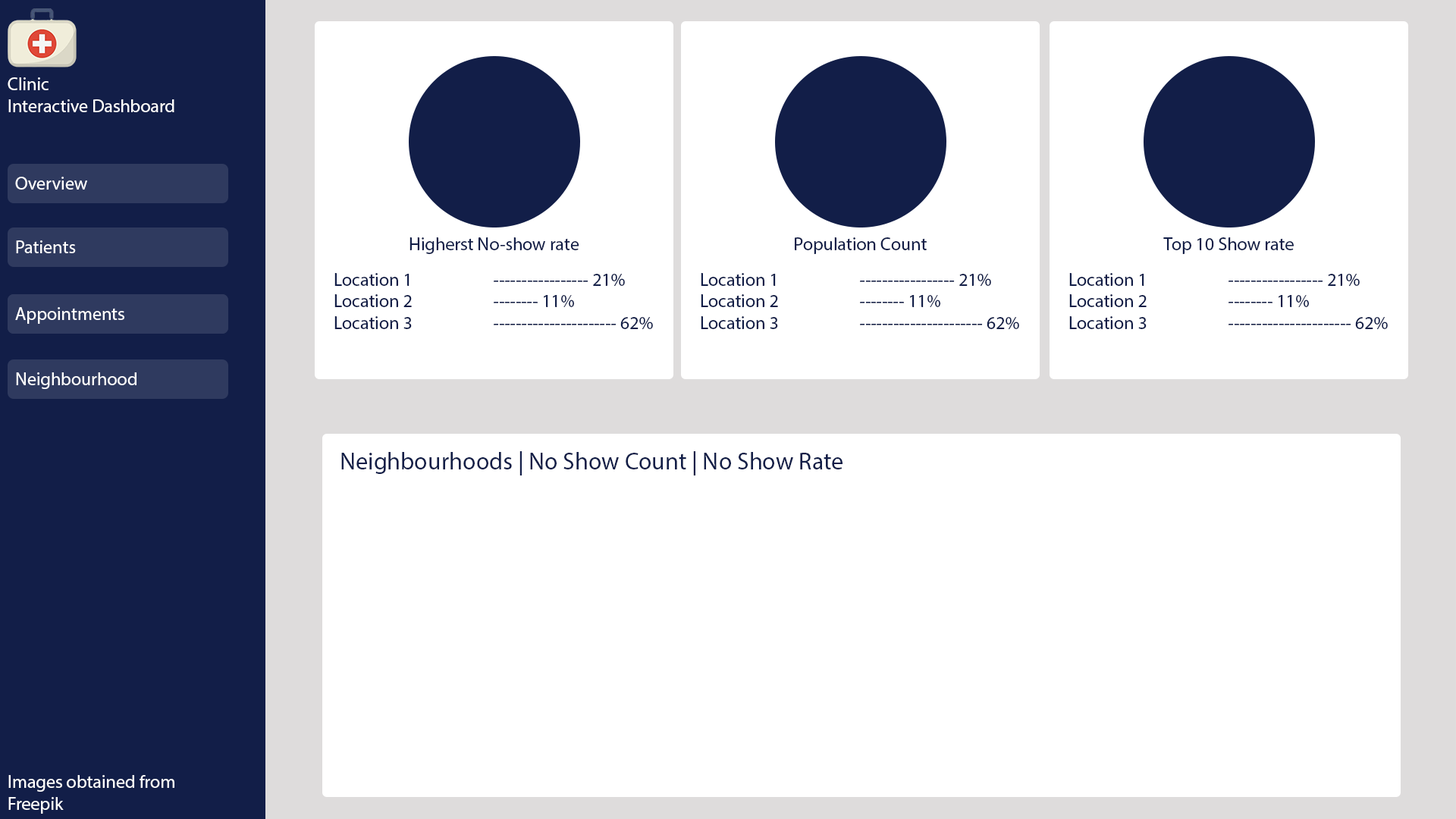
<style>
.page{position:relative;width:1456px;height:819px;background:#ffffff}
.page>*{position:absolute;margin:0}
.t1{font:18.2px "MyriadPro-Regular";color:#ffffff}
.t2{font:18.2px "MyriadPro-Regular";color:#121e48}
.t3{font:24.3px "MyriadPro-Regular";color:#121e48}
</style>
<div class="page">
<p class="t1" style="left:8px;top:77px;width:166px;height:35px">Clinic<br>Interactive Dashboard</p>
<p class="t1" style="left:15px;top:177px;width:72px;height:13px">Overview</p>
<p class="t1" style="left:16px;top:240px;width:60px;height:13px">Patients</p>
<p class="t2" style="left:409px;top:237px;width:170px;height:17px">Higherst No-show rate</p>
<p class="t2" style="left:795px;top:237px;width:132px;height:17px">Population Count</p>
<p class="t2" style="left:1163px;top:237px;width:131px;height:17px">Top 10 Show rate</p>
<p class="t2" style="left:334px;top:273px;width:319px;height:57px">Location 1                     ----------------- 21%<br>Location 2         -------- 11%<br>Location 3                     ---------------------- 62%</p>
<p class="t2" style="left:701px;top:273px;width:318px;height:57px">Location 1                     ----------------- 21%<br>Location 2         -------- 11%<br>Location 3                     ---------------------- 62%</p>
<p class="t2" style="left:1069px;top:273px;width:319px;height:57px">Location 1                     ----------------- 21%<br>Location 2         -------- 11%<br>Location 3                     ---------------------- 62%</p>
<p class="t1" style="left:15px;top:307px;width:109px;height:17px">Appointments</p>
<p class="t1" style="left:16px;top:372px;width:120px;height:17px">Neighbourhood</p>
<p class="t3" style="left:341px;top:451px;width:501px;height:24px">Neighbourhoods | No Show Count | No Show Rate</p>
<p class="t1" style="left:8px;top:775px;width:166px;height:39px">Images obtained from<br>Freepik</p>
</div>
